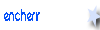
<style>
.page{position:relative;width:100px;height:30px;background:#ffffff}
.page>*{position:absolute;margin:0}
.t1{font:18.7px "REZ";color:#0450fa;scale:0.67 1}
</style>
<div class="page">
<p class="t1" style="left:4px;top:9px;width:36px;height:12px">encherir</p>
</div>
